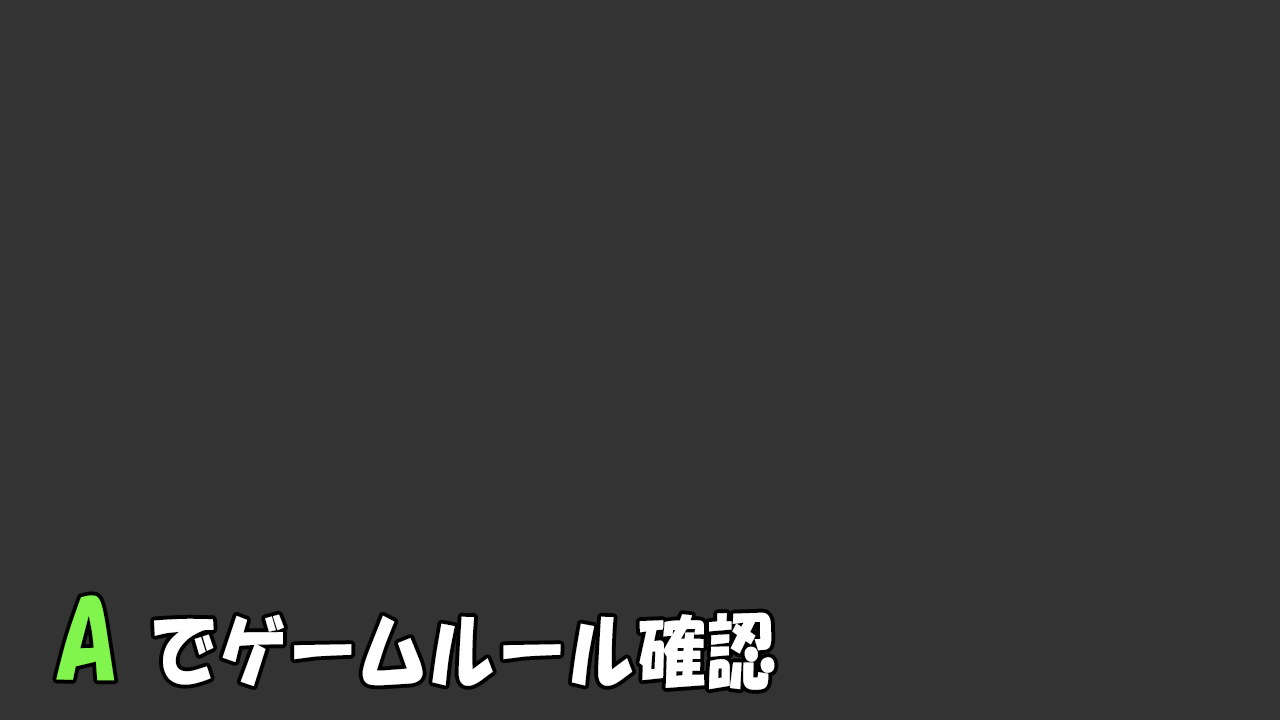
<style>
.page{position:relative;width:1280px;height:720px;background:#333333}
.page>*{position:absolute;margin:0}
.t1{font:80px "HGSSoeiKakupoptai";letter-spacing:0.025em;color:#ffffff;scale:0.85 1}
.t2{font:25px "HGSSoeiKakupoptai";letter-spacing:0.025em;color:#81f54e;scale:0.85 1}
</style>
<div class="page">
<p class="t1" style="left:56px;top:595px;width:719px;height:95px"><span class="t2">A </span>でゲームルール確認</p>
</div>
